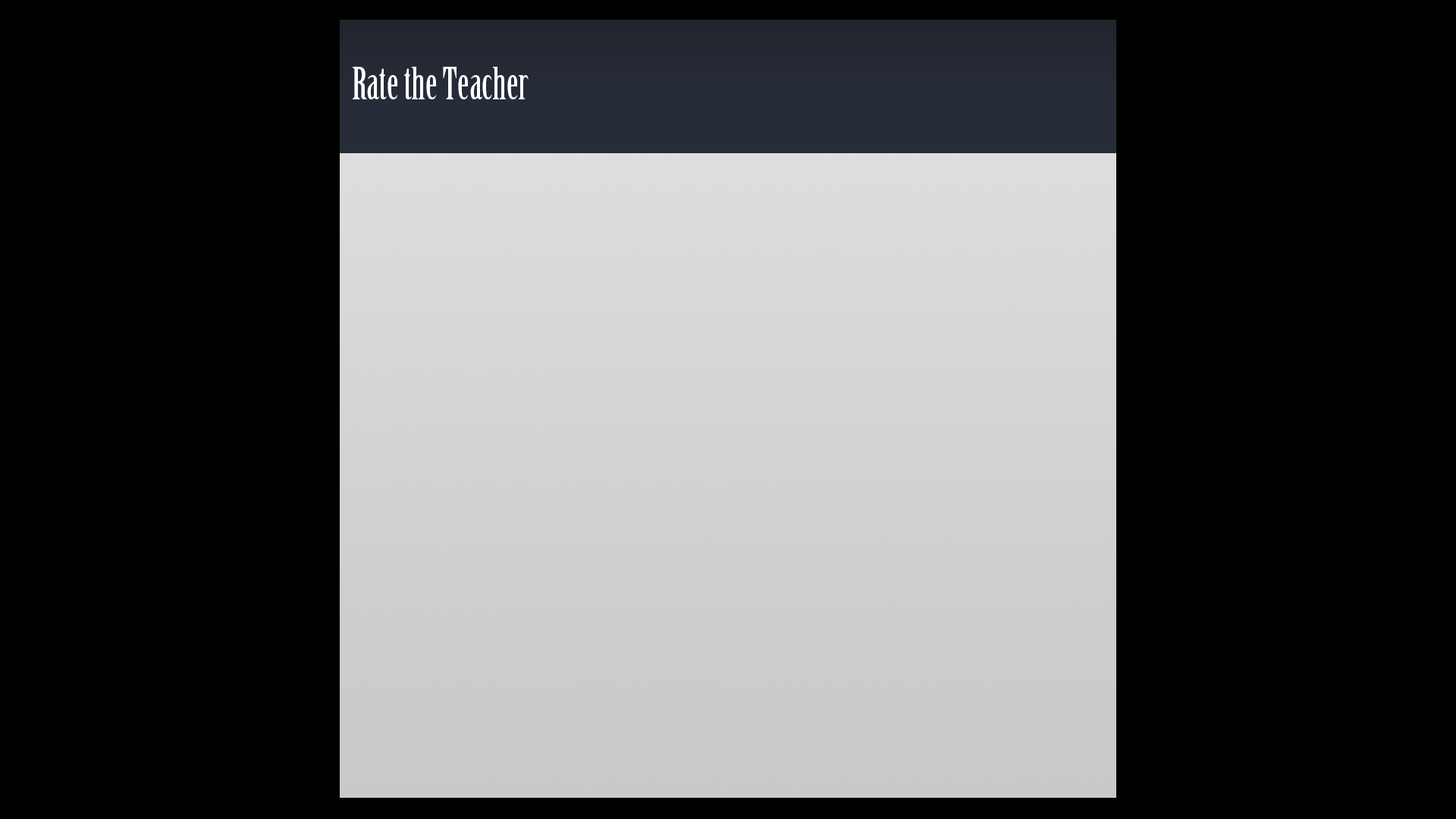
<style>
.page{position:relative;width:1456px;height:819px;background:#000000}
.page>*{position:absolute;margin:0}
.t1{font:44px "BirchStd";color:#ffffff}
</style>
<div class="page">
<p class="t1" style="left:352px;top:67px;width:177px;height:32px">Rate the Teacher</p>
</div>
